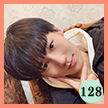
<style>
.page{position:relative;width:108px;height:108px}
.page>*{position:absolute;margin:0}
.t1{font:12px "DFNMing-XB-HK-BF";letter-spacing:0.1em;color:#000000;font-weight:bold}
</style>
<div class="page">
<p class="t1" style="left:81px;top:86px;width:21px;height:11px">128</p>
</div>
